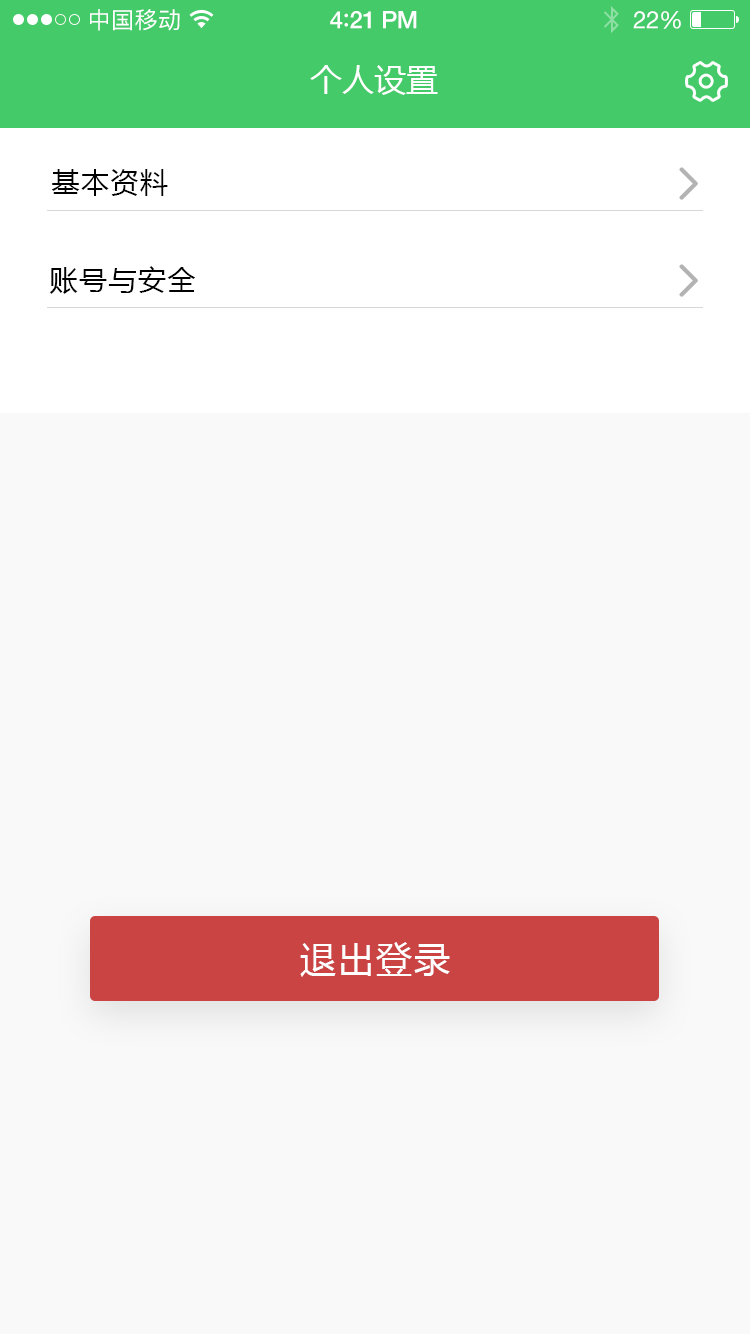
<style>
.page{position:relative;width:750px;height:1334px;background:#f9f9f9}
.page>*{position:absolute;margin:0}
.t1{font:23px "PingFangSC-Regular";letter-spacing:0.02em;color:#ffffff}
.t2{font:24px "HelveticaNeue-Medium";letter-spacing:-0.02em;color:#ffffff}
.t3{font:26px "Avenir-Medium";letter-spacing:-0.02em;color:#ffffff}
.t4{font:24px "HelveticaNeue";letter-spacing:-0.02em;color:#ffffff}
.t5{font:32px "MicrosoftYaHei";color:#ffffff;text-transform:uppercase}
.t6{font:28px "MicrosoftYaHei";letter-spacing:0.05em;color:#010101;text-transform:uppercase}
.t7{font:36px "MicrosoftYaHei";letter-spacing:0.06em;color:#ffffff;text-transform:uppercase}
</style>
<div class="page">
<p class="t1" style="left:90px;top:9px;width:90px;height:22px">中国移动</p>
<p class="t2" style="left:330px;top:11px;width:87px;height:18px">4<span class="t3">:</span>21 PM</p>
<p class="t4" style="left:633px;top:11px;width:48px;height:18px">22%</p>
<p class="t5" style="left:310px;top:65px;width:128px;height:30px">个人设置</p>
<p class="t6" style="left:51px;top:169px;width:117px;height:27px">基本资料</p>
<p class="t6" style="left:49px;top:266px;width:147px;height:28px">账号与安全</p>
<p class="t7" style="left:300px;top:942px;width:150px;height:35px">退出登录</p>
</div>
